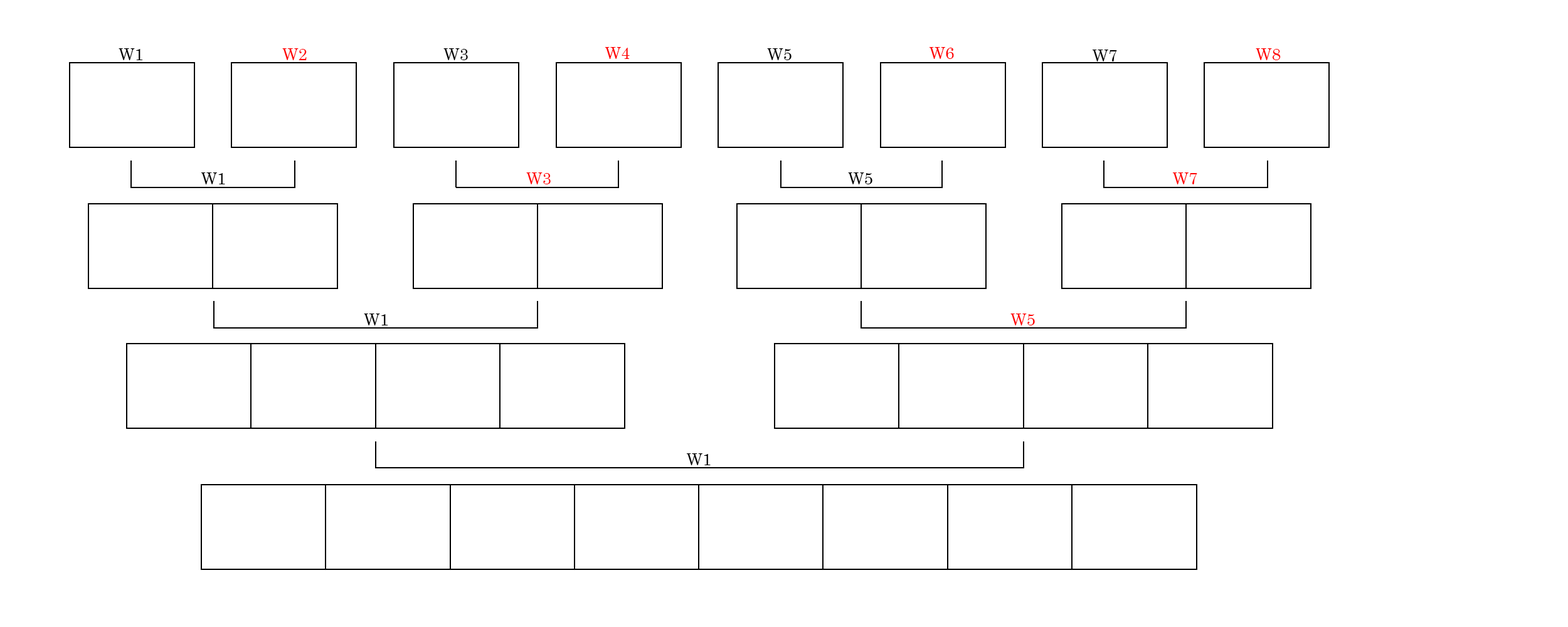
<style>
.page{position:relative;width:1568px;height:627px;background:#ffffff}
.page>*{position:absolute;margin:0}
.t1{font:16.3px "Century";color:#000000}
.t2{font:16.3px "Century";color:#ff0000}
</style>
<div class="page">
<p class="t1" style="left:119px;top:48px;width:24px;height:12px">W1</p>
<p class="t2" style="left:282px;top:48px;width:25px;height:12px">W2</p>
<p class="t1" style="left:443px;top:48px;width:25px;height:12px">W3</p>
<p class="t2" style="left:605px;top:47px;width:25px;height:12px">W4</p>
<p class="t1" style="left:767px;top:48px;width:25px;height:12px">W5</p>
<p class="t2" style="left:929px;top:47px;width:25px;height:12px">W6</p>
<p class="t1" style="left:1092px;top:50px;width:25px;height:11px">W7</p>
<p class="t2" style="left:1256px;top:48px;width:25px;height:12px">W8</p>
<p class="t1" style="left:201px;top:172px;width:24px;height:12px">W1</p>
<p class="t2" style="left:526px;top:172px;width:25px;height:12px">W3</p>
<p class="t1" style="left:848px;top:172px;width:24px;height:12px">W5</p>
<p class="t2" style="left:1172px;top:172px;width:25px;height:12px">W7</p>
<p class="t1" style="left:364px;top:314px;width:24px;height:12px">W1</p>
<p class="t2" style="left:1010px;top:314px;width:25px;height:12px">W5</p>
<p class="t1" style="left:686px;top:453px;width:25px;height:12px">W1</p>
</div>
